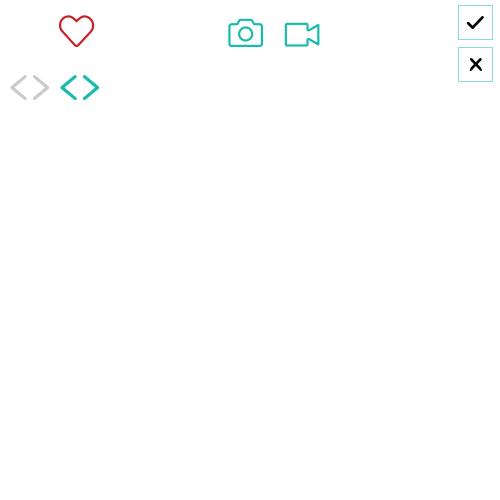
<style>
.page{position:relative;width:500px;height:500px;background:#ffffff}
.page>*{position:absolute;margin:0}
.t1{font:62px "GreyscaleBasic";color:#cbcbcb}
.t2{font:62px "GreyscaleBasic";color:#15bbad}
</style>
<div class="page">
<p class="t1" style="left:10px;top:75px;width:17px;height:26px">&lt;</p>
<p class="t1" style="left:32px;top:75px;width:18px;height:26px">&gt;</p>
<p class="t2" style="left:60px;top:75px;width:17px;height:26px">&lt;</p>
<p class="t2" style="left:82px;top:75px;width:18px;height:26px">&gt;</p>
</div>
